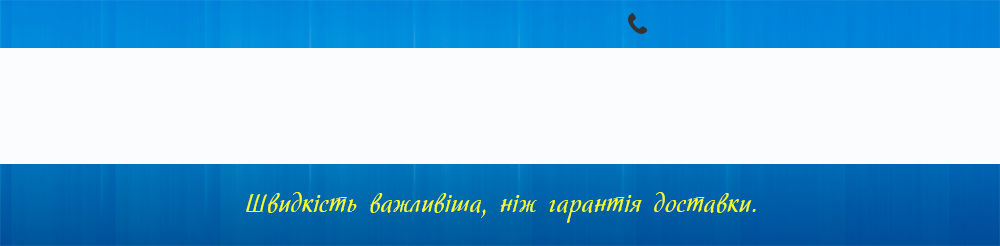
<style>
.page{position:relative;width:1000px;height:246px;background:#fbfcfd}
.page>*{position:absolute;margin:0}
.t1{font:26px "Hortensia";color:#f7ff20}
</style>
<div class="page">
<p class="t1" style="left:246px;top:192px;width:510px;height:31px">Швидкість важливіша, ніж гарантія доставки.</p>
</div>
